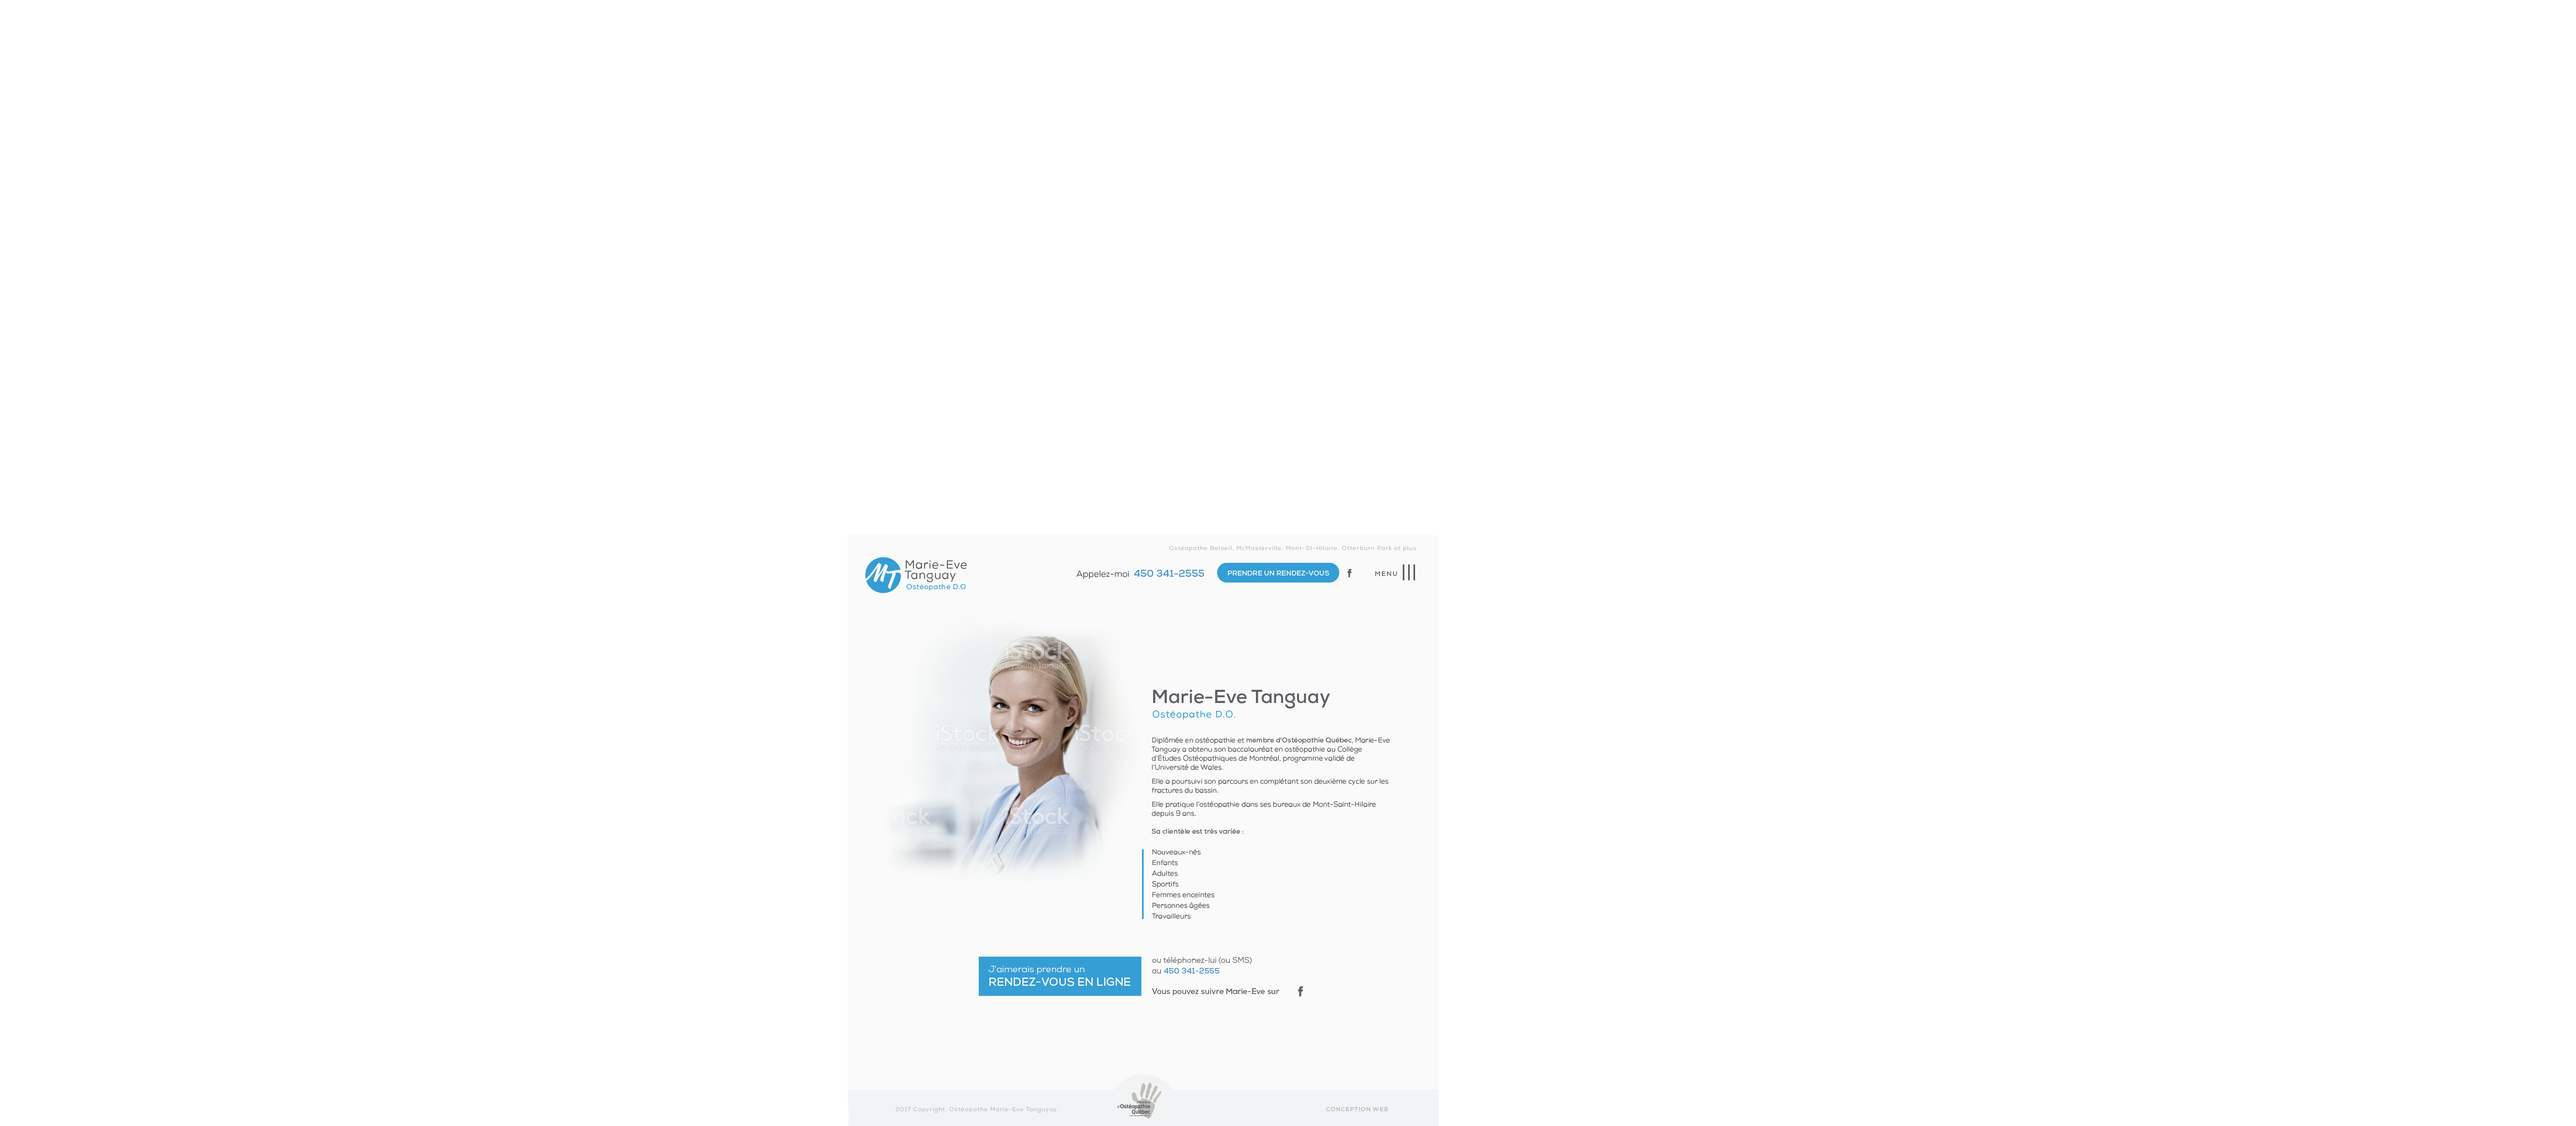
<style>
.page{position:relative;width:2576px;height:1126px;background:#ffffff}
.page>*{position:absolute;margin:0}
.t1{font:5.8px "Nexa-Book";letter-spacing:0.1em;color:#b5bbb9}
.t2{font:11.7px/10.1px "NexaRegular";letter-spacing:0.045em;color:#5e5f65}
.t3{font:9.9px "Nexa-Bold";color:#4691c8}
.t4{font:8.6px "NexaRegular";color:#5e5f65}
.t5{font:7px "Nexa-Bold";color:#f9faf9;text-transform:uppercase}
.t6{font:6.5px "NexaRegular";letter-spacing:0.145em;color:#4f4e4e}
.t7{font:7.1px "NexaRegular";letter-spacing:0.045em;color:#349dd4}
.t8{font:18.9px "Nexa-Bold";color:#5e5f65}
.t9{font:9.5px "NexaRegular";letter-spacing:0.06em;color:#349ed5}
.t10{font:7px/9px "NexaRegular";color:#5e5f65}
.t11{font:7px/9px "Nexa-Bold";color:#5e5f65}
.t12{font:7px/1.6px "NexaRegular";color:#5e5f65}
.t13{font:9.1px/11.7px "Nexa-Book";color:#f6f6f6}
.t14{font:11.4px/13.7px "Nexa-Bold";color:#f6f6f6;text-transform:uppercase}
.t15{font:7.8px/10.8px "Nexa-Bold";color:#5e5f65}
.t16{font:7.8px/10.8px "Nexa-Book";color:#5e5f65}
.t17{font:7.8px/10.8px "Nexa-Bold";color:#4691c8}
.t18{font:5.8px "Nexa-Bold";letter-spacing:0.1em;color:#b5bbb9;text-transform:uppercase}
</style>
<div class="page">
<p class="t1" style="left:1169px;top:546px;width:247px;height:5px">Ostéopathe Beloeil, McMasterville, Mont-St-Hilaire, Otterburn Park et plus</p>
<p class="t2" style="left:905px;top:561px;width:62px;height:21px">Marie-Eve <br>Tanguay</p>
<p class="t3" style="left:1076px;top:570px;width:128px;height:9px"><span class="t4">Appelez-moi  </span>450 341-2555</p>
<p class="t5" style="left:1228px;top:571px;width:101px;height:5px">Prendre un rendez-vous</p>
<p class="t6" style="left:1375px;top:572px;width:22px;height:4px">MENU</p>
<p class="t7" style="left:906px;top:584px;width:60px;height:7px">Ostéopathe D.O</p>
<p class="t8" style="left:1153px;top:690px;width:177px;height:19px">Marie-Eve Tanguay</p>
<p class="t9" style="left:1153px;top:711px;width:82px;height:9px">Ostéopathe D.O.</p>
<p class="t10" style="left:1151px;top:737px;width:239px;height:97px">Diplômée en ostéopathie et<span class="t11"> membre d'Ostéopathie Québec</span>, Marie-Eve Tanguay a obtenu son baccalauréat en ostéopathie au Collège d’Études Ostéopathiques de Montréal, programme validé de l’Université de Wales. <br>Elle a poursuivi son parcours en complétant son deuxième cycle sur les fractures du bassin.<br>Elle pratique l’ostéopathie dans ses bureaux de Mont-Saint-Hilaire depuis 9 ans. <br><span class="t11">Sa clientèle est très variée :</span></p>
<p class="t12" style="left:1152px;top:849px;width:62px;height:70px">Nouveaux-nés<br>Enfants<br>Adultes<br>Sportifs<br>Femmes enceintes<br>Personnes âgées<br>Travailleurs</p>
<p class="t13" style="left:989px;top:966px;width:141px;height:21px">J’aimerais prendre un<br><span class="t14">rendez-vous en ligne</span></p>
<p class="t15" style="left:1152px;top:957px;width:127px;height:39px"><span class="t16">ou téléphonez-lui (ou SMS) <br>au </span><span class="t17">450 341-2555<br></span>Vous pouvez suivre Marie-Eve sur</p>
<p class="t1" style="left:896px;top:1107px;width:162px;height:7px">2017 Copyright. Ostéopathe Marie-Eve Tanguyay.</p>
<p class="t18" style="left:1326px;top:1107px;width:62px;height:5px">Conception web</p>
</div>
